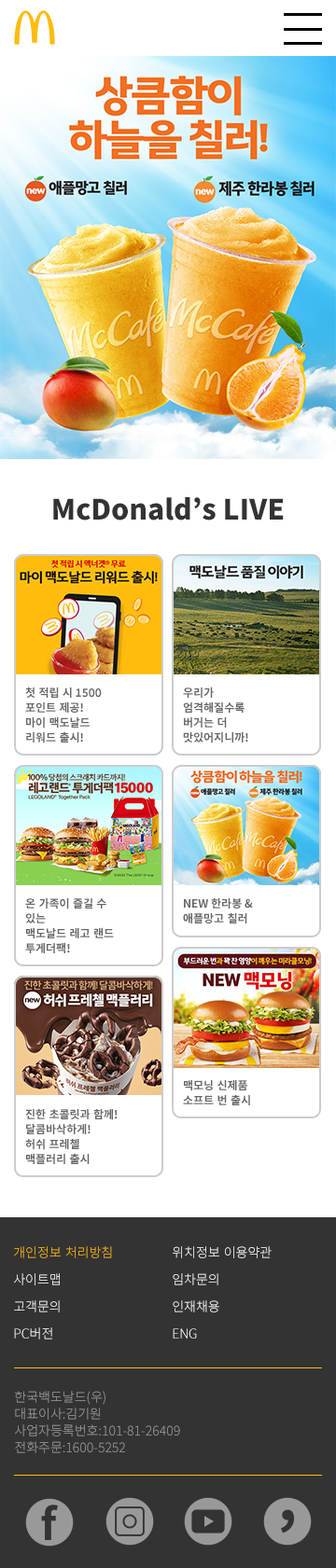
<style>
.page{position:relative;width:336px;height:1568px;background:#ffffff}
.page>*{position:absolute;margin:0}
.t1{font:28px "NotoSansKR-Black";color:#333333}
.t2{font:11.2px/14.9px "NotoSansKR-Bold";color:#666666}
.t3{font:13.1px "NotoSansKR-Light";color:#ffbb0a}
.t4{font:13.1px "NotoSansKR-Light"}
.t5{font:13.1px "NotoSansKR-Light";color:#ffffff}
.t6{font:13.1px/16.8px "NotoSansKR-Light";color:#999999}
</style>
<div class="page">
<p class="t1" style="left:53px;top:497px;width:231px;height:23px">McDonald’s LIVE</p>
<p class="t2" style="left:25px;top:687px;width:77px;height:56px">첫 적립 시 1500<br>포인트 제공!<br>마이 맥도날드<br>리워드 출시!</p>
<p class="t2" style="left:183px;top:687px;width:65px;height:56px">우리가<br>엄격해질수록<br>버거는 더<br>맛있어지니까!</p>
<p class="t2" style="left:25px;top:897px;width:89px;height:56px">온 가족이 즐길 수 <br>있는<br>맥도날드 레고 랜드<br>투게더팩!</p>
<p class="t2" style="left:183px;top:898px;width:70px;height:25px">NEW 한라봉 &amp;<br>애플망고 칠러</p>
<p class="t2" style="left:183px;top:1080px;width:67px;height:25px">맥모닝 신제품<br>소프트 번 출시</p>
<p class="t2" style="left:25px;top:1109px;width:93px;height:55px">진한 초콜릿과 함께!<br>달콤바삭하게!<br>허쉬 프레첼<br>맥플러리 출시</p>
<p class="t3" style="left:14px;top:1246px;width:98px;height:12px">개인정보 처리방침</p>
<p class="t4" style="left:173px;top:1246px;width:98px;height:12px">위치정보 이용약관</p>
<p class="t5" style="left:14px;top:1273px;width:46px;height:12px">사이트맵</p>
<p class="t4" style="left:173px;top:1273px;width:45px;height:12px">임차문의</p>
<p class="t4" style="left:14px;top:1300px;width:46px;height:12px">고객문의</p>
<p class="t4" style="left:173px;top:1300px;width:46px;height:12px">인재채용</p>
<p class="t4" style="left:14px;top:1327px;width:38px;height:12px">PC버전</p>
<p class="t5" style="left:173px;top:1328px;width:24px;height:11px">ENG</p>
<p class="t6" style="left:15px;top:1391px;width:165px;height:62px">한국백도날드(우)<br>대표이사:김기원<br>사업자등록번호:101-81-26409<br>전화주문:1600-5252</p>
</div>
